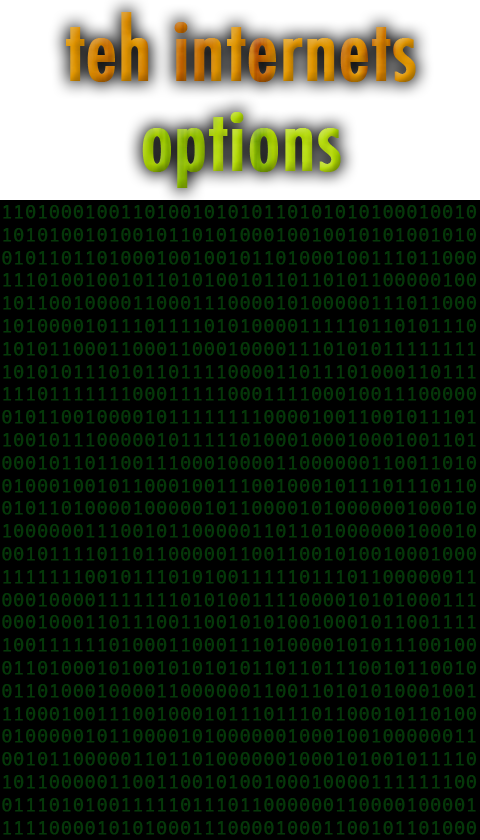
<style>
.page{position:relative;width:480px;height:840px;background:#000000}
.page>*{position:absolute;margin:0}
.t1{font:82px "Futura-CondensedMedium";font-weight:bold}
</style>
<div class="page">
<p class="t1" style="left:66px;top:12px;width:350px;height:70px">teh internets</p>
<p class="t1" style="left:142px;top:112px;width:199px;height:76px">options</p>
</div>
